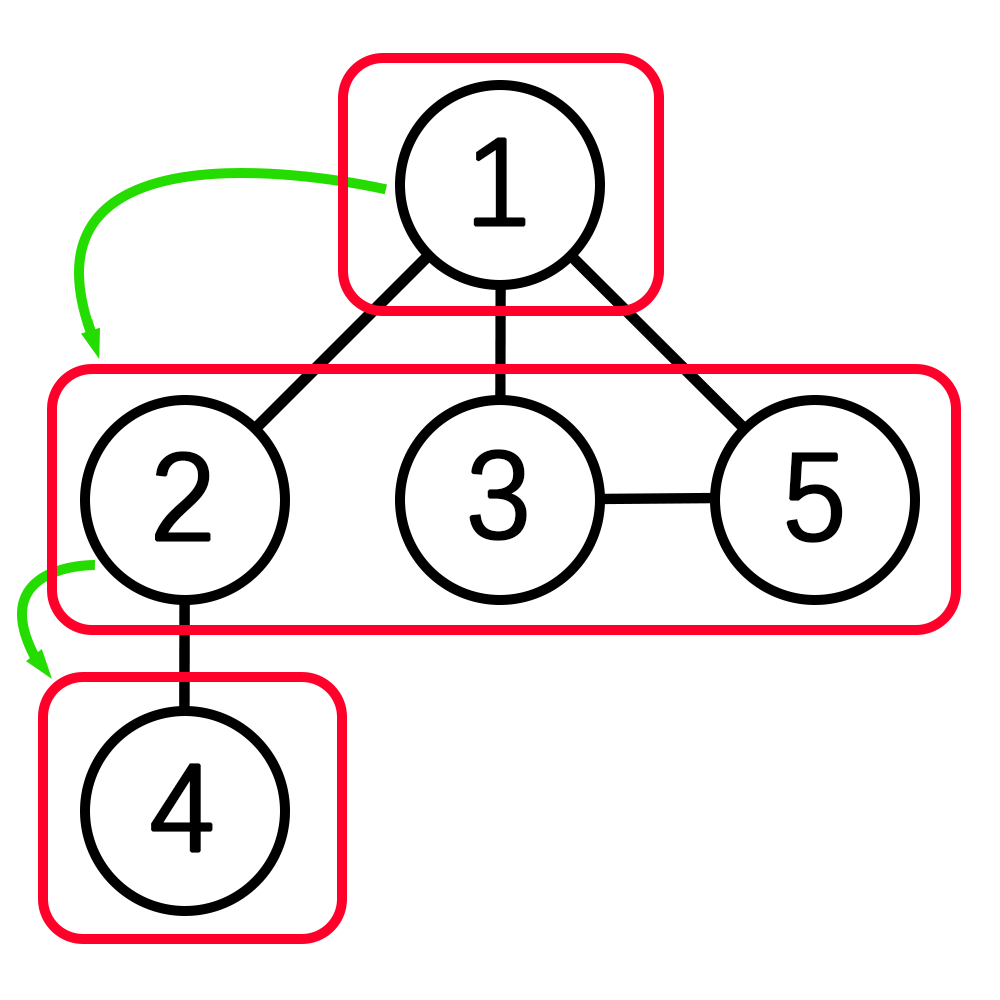
<style>
.page{position:relative;width:1000px;height:1000px;background:#ffffff}
.page>*{position:absolute;margin:0}
.t1{font:125px "DengXian";color:#000000;font-weight:bold}
</style>
<div class="page">
<p class="t1" style="left:473px;top:137px;width:53px;height:90px">1</p>
<p class="t1" style="left:469px;top:449px;width:58px;height:92px">3</p>
<p class="t1" style="left:155px;top:451px;width:56px;height:91px">2</p>
<p class="t1" style="left:786px;top:452px;width:57px;height:91px">5</p>
<p class="t1" style="left:151px;top:763px;width:62px;height:90px">4</p>
</div>
